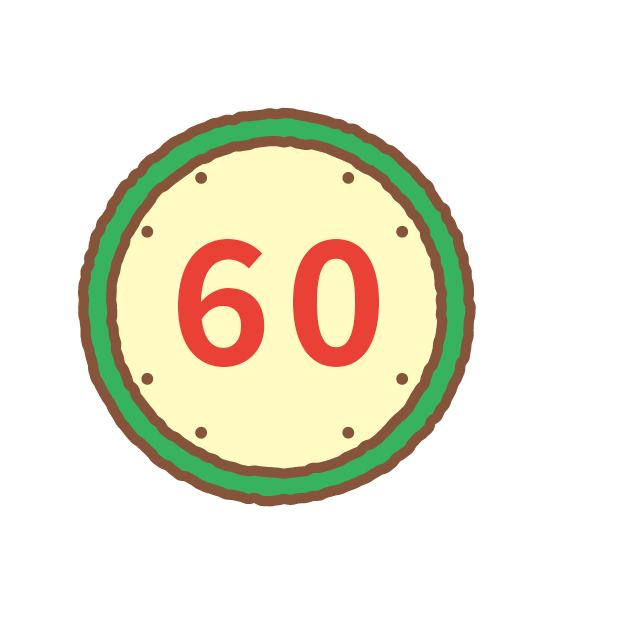
<style>
.page{position:relative;width:625px;height:624px;background:#ffffff}
.page>*{position:absolute;margin:0}
.t1{font:172.4px "SourceHanSansJP-Bold";letter-spacing:0.08em;color:#e94135}
</style>
<div class="page">
<p class="t1" style="left:178px;top:239px;width:201px;height:129px">60</p>
</div>
